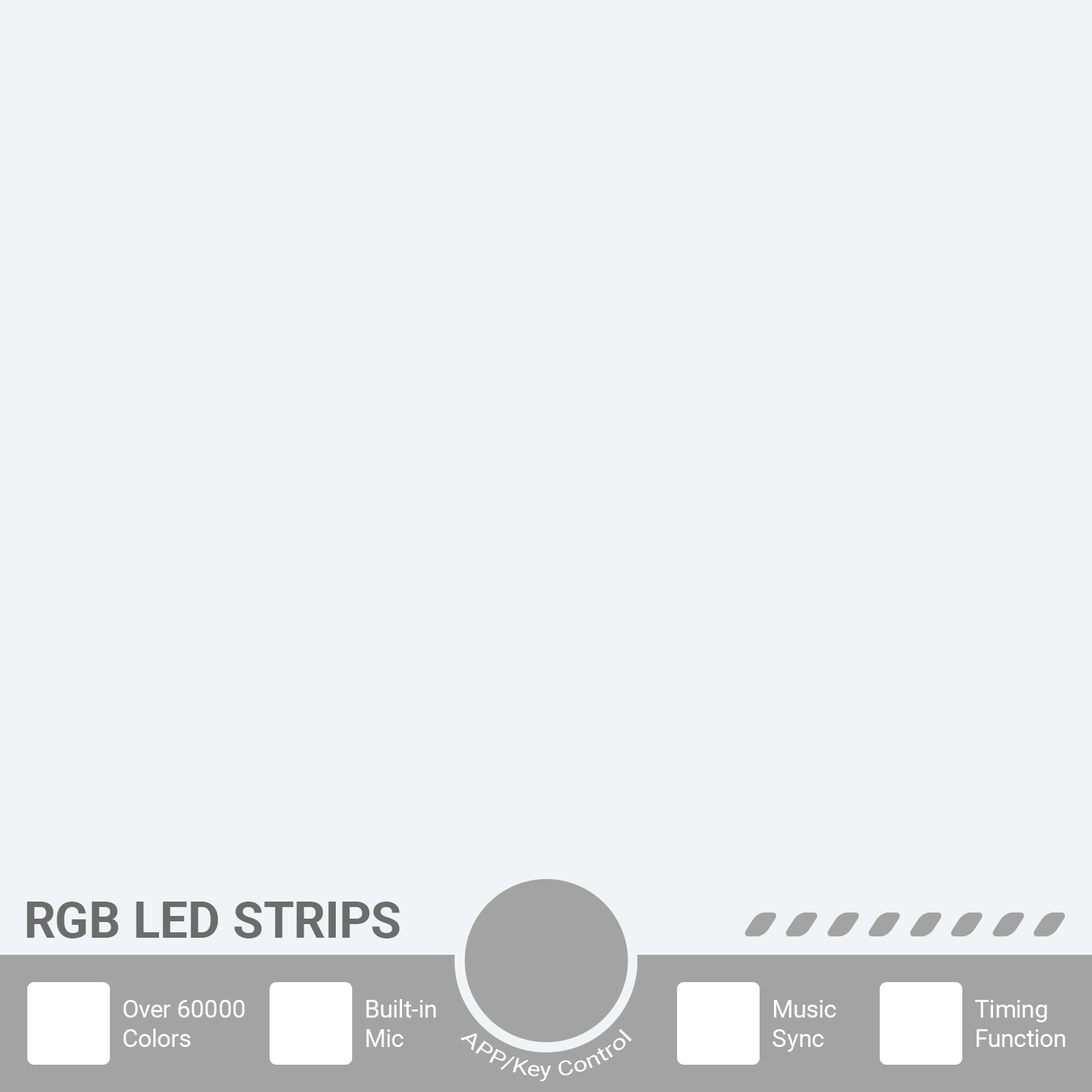
<style>
.page{position:relative;width:1092px;height:1092px;background:#f2f3f6}
.page>*{position:absolute;margin:0}
.t1{font:50.5px "Roboto-Bold";color:#6c6c6c}
.t2{font:24.6px "Roboto-Regular";color:#ffffff}
.t3{font:20.5px "Roboto-Regular";color:#ffffff}
</style>
<div class="page">
<p class="t1" style="left:27px;top:902px;width:373px;height:36px">RGB LED STRIPS</p>
<p class="t2" style="left:124px;top:1000px;width:121px;height:47px">Over 60000<br>Colors</p>
<p class="t2" style="left:366px;top:999px;width:70px;height:48px">Built-in<br>Mic</p>
<p class="t2" style="left:773px;top:1000px;width:63px;height:52px">Music<br>Sync</p>
<p class="t2" style="left:975px;top:1000px;width:90px;height:47px">Timing<br>Function</p>
<p class="t3" style="left:460px;top:1029px;width:172px;height:53px">APP/Key Control</p>
</div>
